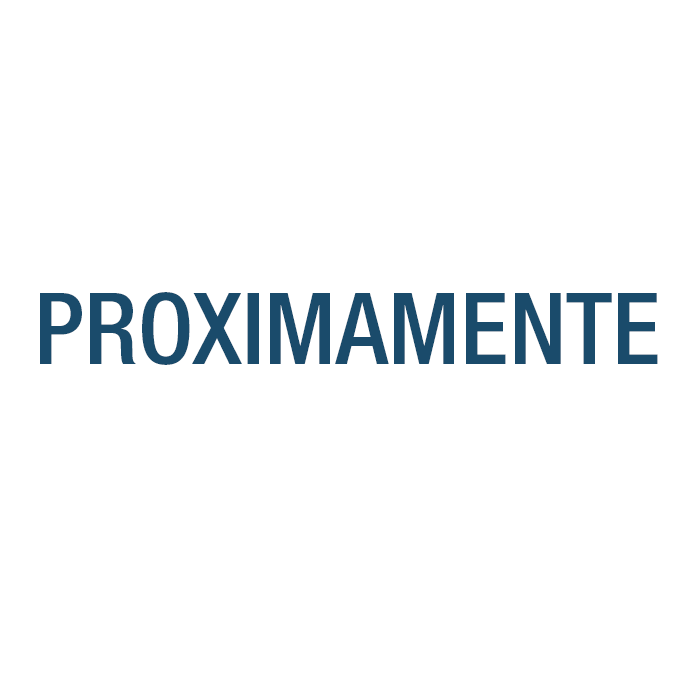
<style>
.page{position:relative;width:700px;height:700px;background:#ffffff}
.page>*{position:absolute;margin:0}
.t1{font:100px "HelveticaNeue-MediumCond";color:#1a4b6b}
</style>
<div class="page">
<p class="t1" style="left:40px;top:292px;width:618px;height:73px">PROXIMAMENTE</p>
</div>
